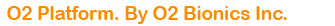
<style>
.page{position:relative;width:335px;height:26px;background:#ffffff}
.page>*{position:absolute;margin:0}
.t1{font:18.7px "ArialRoundedMTBold";color:#ff8a00}
</style>
<div class="page">
<p class="t1" style="left:7px;top:6px;width:280px;height:18px">O2 Platform. By O2 Bionics Inc.</p>
</div>
